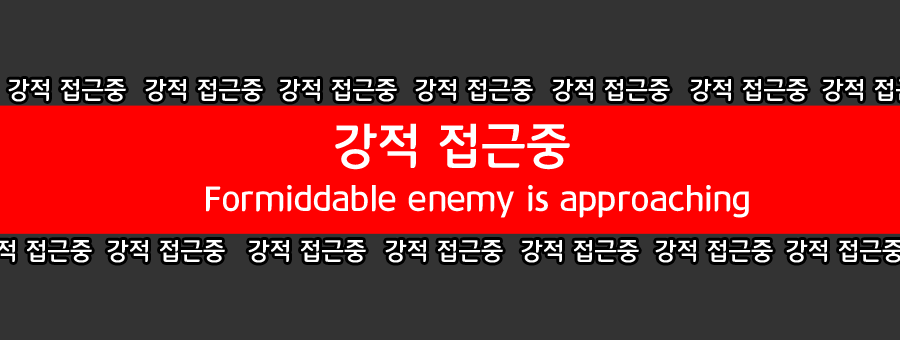
<style>
.page{position:relative;width:900px;height:340px;background:#333333}
.page>*{position:absolute;margin:0}
.t1{font:25px "12LotteMartDreamBold";color:#ffffff}
.t2{font:50px "12LotteMartDreamBold";color:#ffffff}
.t3{font:35px "12LotteMartDreamBold";color:#ffffff}
</style>
<div class="page">
<p class="t1" style="left:8px;top:79px;width:118px;height:23px">강적 접근중</p>
<p class="t1" style="left:145px;top:79px;width:118px;height:23px">강적 접근중</p>
<p class="t1" style="left:279px;top:79px;width:118px;height:23px">강적 접근중</p>
<p class="t1" style="left:415px;top:79px;width:118px;height:23px">강적 접근중</p>
<p class="t1" style="left:552px;top:79px;width:118px;height:23px">강적 접근중</p>
<p class="t1" style="left:690px;top:79px;width:118px;height:23px">강적 접근중</p>
<p class="t2" style="left:335px;top:123px;width:235px;height:47px">강적 접근중</p>
<p class="t3" style="left:206px;top:185px;width:543px;height:33px">Formiddable enemy is approaching</p>
<p class="t1" style="left:107px;top:240px;width:118px;height:23px">강적 접근중</p>
<p class="t1" style="left:248px;top:240px;width:118px;height:23px">강적 접근중</p>
<p class="t1" style="left:385px;top:240px;width:118px;height:23px">강적 접근중</p>
<p class="t1" style="left:521px;top:240px;width:118px;height:23px">강적 접근중</p>
<p class="t1" style="left:655px;top:240px;width:118px;height:23px">강적 접근중</p>
</div>
